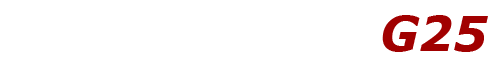
<style>
.page{position:relative;width:500px;height:70px;background:#ffffff}
.page>*{position:absolute;margin:0}
.t1{font:48px "Verdana-BoldItalic";color:#a10000}
</style>
<div class="page">
<p class="t1" style="left:382px;top:15px;width:106px;height:37px">G25</p>
</div>
